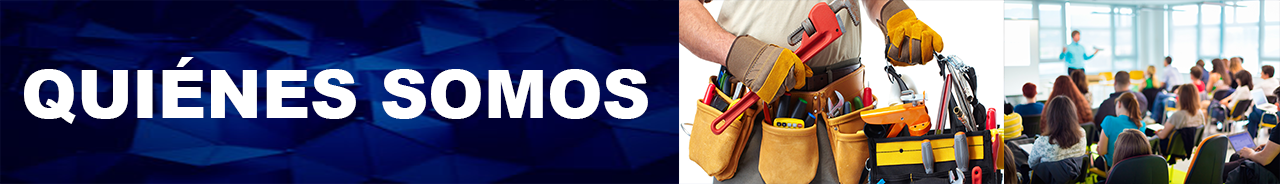
<style>
.page{position:relative;width:1280px;height:184px}
.page>*{position:absolute;margin:0}
.t1{font:66.7px "Arial-Black";color:#ffffff}
</style>
<div class="page">
<p class="t1" style="left:24px;top:57px;width:624px;height:67px">QUIÉNES SOMOS</p>
</div>
